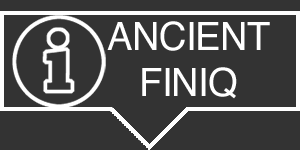
<style>
.page{position:relative;width:300px;height:150px;background:#333333}
.page>*{position:absolute;margin:0}
.t1{font:38.9px "Helvetica";letter-spacing:-0.02em;color:#ffffff}
</style>
<div class="page">
<p class="t1" style="left:107px;top:21px;width:163px;height:78px;text-align:center">ANCIENT<br>FINIQ</p>
</div>
